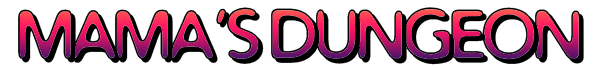
<style>
.page{position:relative;width:600px;height:70px;background:#ffffff}
.page>*{position:absolute;margin:0}
.t1{font:66.6px "DistroBev";letter-spacing:-0.06em;color:#000000;text-transform:uppercase}
</style>
<div class="page">
<p class="t1" style="left:18px;top:7px;width:566px;height:58px">Mama’s Dungeon</p>
</div>
